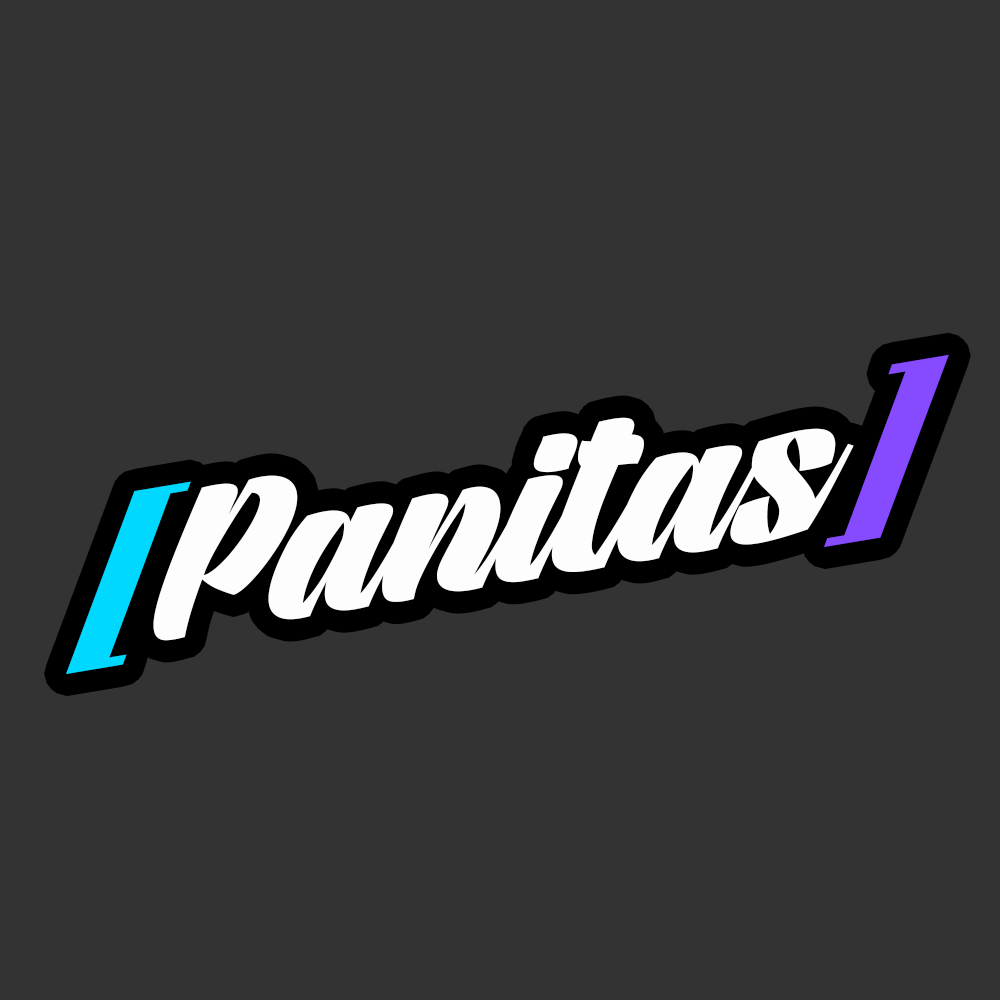
<style>
.page{position:relative;width:1000px;height:1000px;background:#333333}
.page>*{position:absolute;margin:0}
.t1{font:230px "Redshine-Script";color:#fdfdfd}
.t2{font:230px "Redshine-Script";color:#00d8ff}
.t3{font:230px "Redshine-Script";color:#864aff}
</style>
<div class="page">
<p class="t1" style="left:66px;top:354px;width:883px;height:320px;rotate:-10deg"><span class="t2">[</span>Panitas<span class="t3">]</span></p>
</div>
